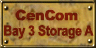
<style>
.page{position:relative;width:96px;height:48px}
.page>*{position:absolute;margin:0}
.t1{font:14px "Arial-Black";letter-spacing:-0.04em;color:#761a08;font-weight:bold}
.t2{font:14px "Arial-BoldMT";letter-spacing:-0.04em;color:#711a07;font-weight:bold;scale:0.86 1}
</style>
<div class="page">
<p class="t1" style="left:15px;top:9px;width:63px;height:12px">CenCom</p>
<p class="t2" style="left:4px;top:25px;width:90px;height:14px">Bay 3 Storage A</p>
</div>
